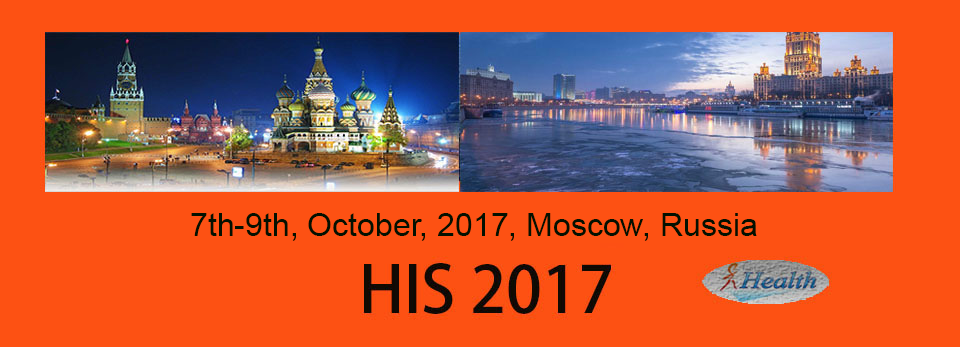
<style>
.page{position:relative;width:960px;height:347px;background:#fd5113}
.page>*{position:absolute;margin:0}
.t1{font:32px "ArialMT";color:#031101}
</style>
<div class="page">
<p class="t1" style="left:191px;top:213px;width:566px;height:28px">7th-9th, October, 2017, Moscow, Russia</p>
</div>
